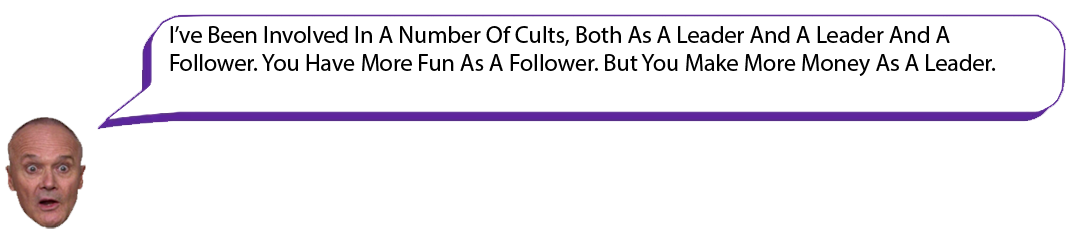
<style>
.page{position:relative;width:1067px;height:233px;background:#ffffff}
.page>*{position:absolute;margin:0}
.t1{font:12px "MyriadPro-Regular";color:#000000}
</style>
<div class="page">
<p class="t1" style="left:170px;top:26px;width:826px;height:50px">I’ve Been Involved In A Number Of Cults, Both As A Leader And A Leader And A Follower. You Have More Fun As A Follower. But You Make More Money As A Leader.</p>
</div>
